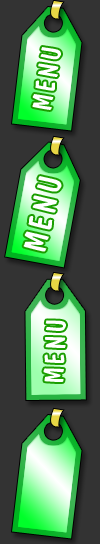
<style>
.page{position:relative;width:100px;height:544px;background:#333333}
.page>*{position:absolute;margin:0}
.t1{font:28.1px "DomCasualBT-Regular";letter-spacing:0.09em;color:#ffffff;font-variant:small-caps}
.t2{font:33.2px "DomCasualBT-Regular";letter-spacing:0.09em;color:#ffffff;font-variant:small-caps}
</style>
<div class="page">
<p class="t1" style="left:32px;top:47px;width:29px;height:63px;rotate:-80deg">MENU</p>
<p class="t2" style="left:23px;top:176px;width:39px;height:76px;rotate:-77deg">MENU</p>
<p class="t1" style="left:43px;top:320px;width:23px;height:62px;rotate:-88deg">MENU</p>
</div>
